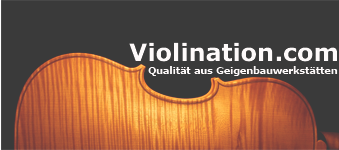
<style>
.page{position:relative;width:339px;height:150px;background:#3a3a3a}
.page>*{position:absolute;margin:0}
.t1{font:24px "Verdana-Bold";color:#fbf7f7}
.t2{font:9.5px "Verdana-Bold";color:#fbf7f7}
</style>
<div class="page">
<p class="t1" style="left:129px;top:42px;width:208px;height:20px">Violination.com</p>
<p class="t2" style="left:148px;top:66px;width:190px;height:10px">Qualität aus Geigenbauwerkstätten</p>
</div>
